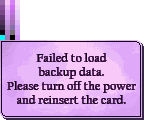
<style>
.page{position:relative;width:144px;height:120px;background:#ffffff}
.page>*{position:absolute;margin:0}
.t1{font:12px/14px "CalifornianFB-Reg";letter-spacing:0.025em;color:#100010}
</style>
<div class="page">
<p class="t1" style="left:7px;top:53px;width:129px;height:51px;text-align:center">Failed to load<br>backup data.<br>Please turn off the power<br>and reinsert the card.</p>
</div>
